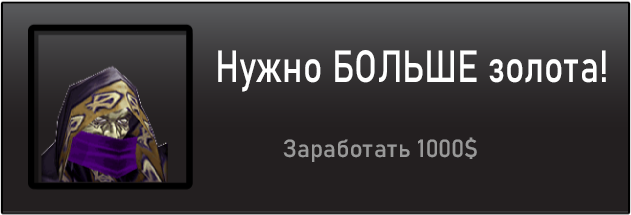
<style>
.page{position:relative;width:631px;height:215px;background:#231f20}
.page>*{position:absolute;margin:0}
.t1{font:44.4px "Bahnschrift";color:#ffffff;scale:0.81 1}
.t2{font:24.6px "Bahnschrift";color:#999999}
</style>
<div class="page">
<p class="t1" style="left:218px;top:50px;width:388px;height:42px">Нужно БОЛЬШЕ золота!</p>
<p class="t2" style="left:283px;top:137px;width:194px;height:25px">Заработать 1000$</p>
</div>
